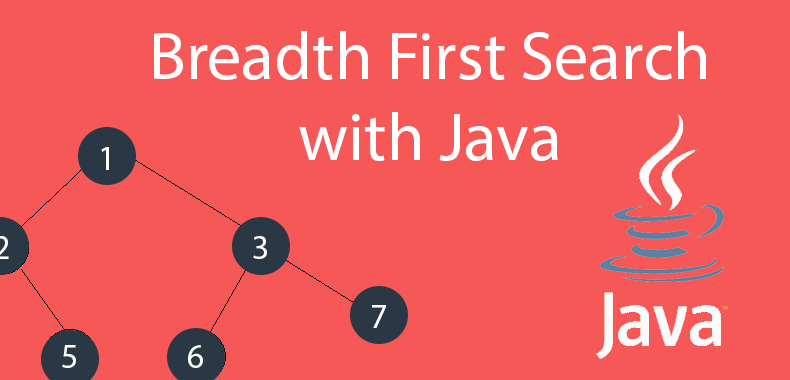
<style>
.page{position:relative;width:790px;height:380px;background:#f55856}
.page>*{position:absolute;margin:0}
.t1{font:68px "MyriadPro-Regular";color:#ffffff}
.t2{font:34px "MyriadPro-Regular";color:#ffffff}
</style>
<div class="page">
<p class="t1" style="left:154px;top:31px;width:552px;height:130px;text-align:center">Breadth First Search with Java</p>
<p class="t2" style="left:101px;top:147px;width:8px;height:23px">1</p>
<p class="t2" style="left:253px;top:236px;width:14px;height:23px">3</p>
<p class="t2" style="left:372px;top:305px;width:14px;height:23px">7</p>
<p class="t2" style="left:62px;top:345px;width:14px;height:23px">5</p>
<p class="t2" style="left:188px;top:345px;width:15px;height:23px">6</p>
</div>
